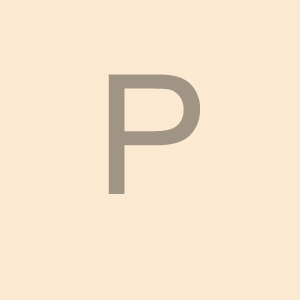
<style>
.page{position:relative;width:300px;height:300px;background:#fbe9d1}
.page>*{position:absolute;margin:0}
.t1{font:166.7px "ArialMT";color:#a09585}
</style>
<div class="page">
<p class="t1" style="left:108px;top:74px;width:92px;height:120px">P</p>
</div>
